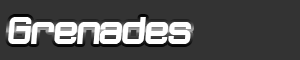
<style>
.page{position:relative;width:300px;height:60px;background:#333333}
.page>*{position:absolute;margin:0}
.t1{font:41px "Dopenakedfoulphatrelaxed";color:#ffffff}
</style>
<div class="page">
<p class="t1" style="left:8px;top:17px;width:183px;height:27px">Grenades</p>
</div>
